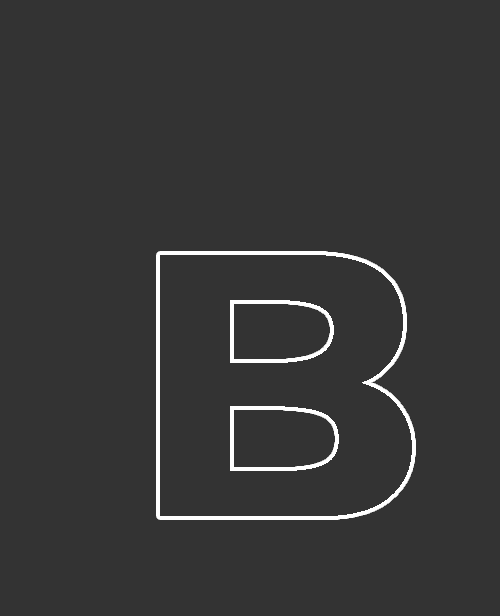
<style>
.page{position:relative;width:500px;height:616px;background:#333333}
.page>*{position:absolute;margin:0}
.t1{font:500px "Arial-BoldMT";color:#333333}
</style>
<div class="page">
<p class="t1" style="left:160px;top:255px;width:252px;height:261px">в</p>
</div>
